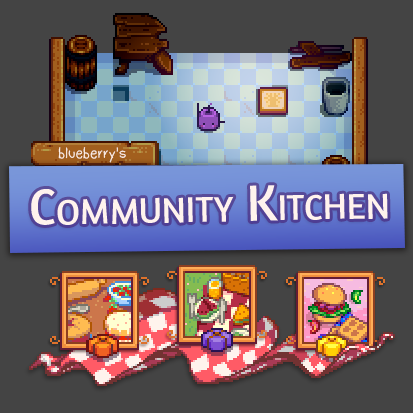
<style>
.page{position:relative;width:413px;height:413px;background:#444444}
.page>*{position:absolute;margin:0}
.t1{font:16px "Dudu_Calligraphy";color:#fff3ed}
.t2{font:52px "Amaranth-Regular";color:#fff3ed;font-variant:small-caps}
</style>
<div class="page">
<p class="t1" style="left:58px;top:147px;width:68px;height:16px">blueberry's</p>
<p class="t2" style="left:31px;top:185px;width:357px;height:40px;rotate:-1deg">Community Kitchen</p>
</div>
